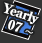
<style>
.page{position:relative;width:42px;height:43px;background:#333333}
.page>*{position:absolute;margin:0}
.t1{font:13px/14px "RyuminPro-ExBold";letter-spacing:-0.08em;color:#ffffff;font-weight:bold}
.t2{font:13px/14px "RyuminPro-ExBold";color:#ffffff;font-weight:bold}
.t3{font:13px/14px "TimesNewRomanPSMT";color:#ffffff;font-weight:bold}
</style>
<div class="page">
<p class="t1" style="left:3px;top:2px;width:36px;height:32px;text-align:center;rotate:19deg">Yearly<br><span class="t2">  07 </span><span class="t3">~</span></p>
</div>
